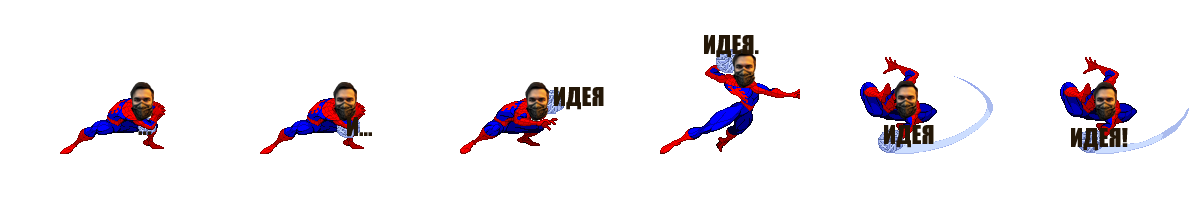
<style>
.page{position:relative;width:1200px;height:200px;background:#ffffff}
.page>*{position:absolute;margin:0}
.t1{font:24px "Impact";color:#241707}
</style>
<div class="page">
<p class="t1" style="left:704px;top:35px;width:55px;height:23px">ИДЕЯ.</p>
<p class="t1" style="left:554px;top:87px;width:50px;height:23px">ИДЕЯ</p>
<p class="t1" style="left:347px;top:117px;width:25px;height:19px">И...</p>
<p class="t1" style="left:884px;top:125px;width:50px;height:23px">ИДЕЯ</p>
<p class="t1" style="left:138px;top:131px;width:13px;height:4px">...</p>
<p class="t1" style="left:1071px;top:128px;width:57px;height:23px">ИДЕЯ!</p>
</div>
